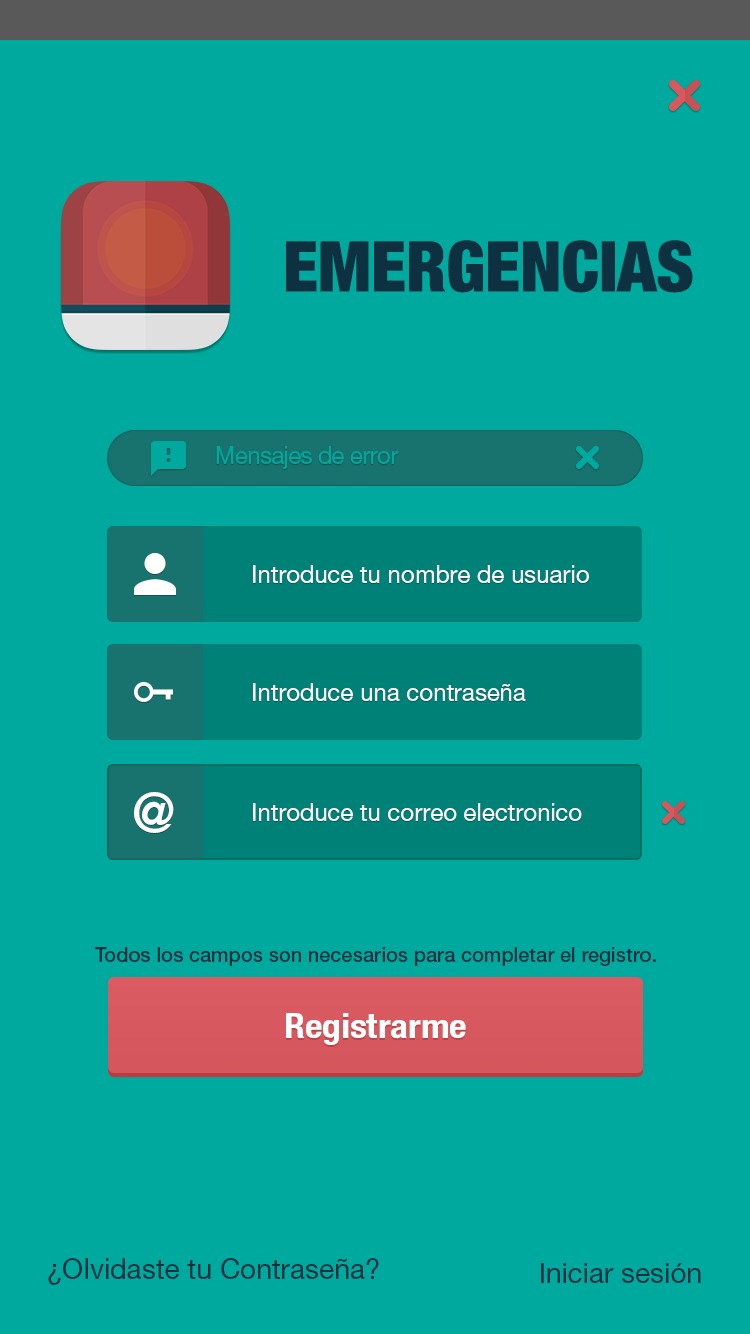
<style>
.page{position:relative;width:750px;height:1334px;background:#00a99d}
.page>*{position:absolute;margin:0}
.t1{font:70px "HelveticaNeueLT-BlackCond";color:#0e3142;text-transform:uppercase}
.t2{font:24px "HelveticaNeueLTPro-Roman";letter-spacing:-0.025em;color:#00a99d}
.t3{font:24px "HelveticaNeueLTPro-Roman";color:#ffffff}
.t4{font:54px "HelveticaNeueLTPro-Bd";letter-spacing:-0.025em;color:#ffffff}
.t5{font:20px "HelveticaNeueLTPro-Md";color:#0e3142}
.t6{font:34px "HelveticaNeueLTPro-BdCn";color:#ffffff;scale:1.11 1}
.t7{font:28.1px "HelveticaNeueLTPro-Roman";color:#0e3142}
.t8{font:28px "HelveticaNeueLTPro-Roman";color:#0e3142}
</style>
<div class="page">
<p class="t1" style="left:286px;top:240px;width:407px;height:53px">emergencias</p>
<p class="t2" style="left:216px;top:446px;width:183px;height:23px">Mensajes de error</p>
<p class="t3" style="left:253px;top:565px;width:336px;height:18px">Introduce tu nombre de usuario</p>
<p class="t3" style="left:253px;top:683px;width:273px;height:18px">Introduce una contraseña</p>
<p class="t4" style="left:134px;top:792px;width:40px;height:41px">@</p>
<p class="t3" style="left:253px;top:803px;width:329px;height:18px">Introduce tu correo electronico</p>
<p class="t5" style="left:95px;top:947px;width:561px;height:19px">Todos los campos son necesarios para completar el registro.</p>
<p class="t6" style="left:286px;top:1013px;width:180px;height:32px">Registrarme</p>
<p class="t7" style="left:48px;top:1258px;width:331px;height:27px">¿Olvidaste tu Contraseña?</p>
<p class="t8" style="left:541px;top:1263px;width:160px;height:20px">Iniciar sesión</p>
</div>
